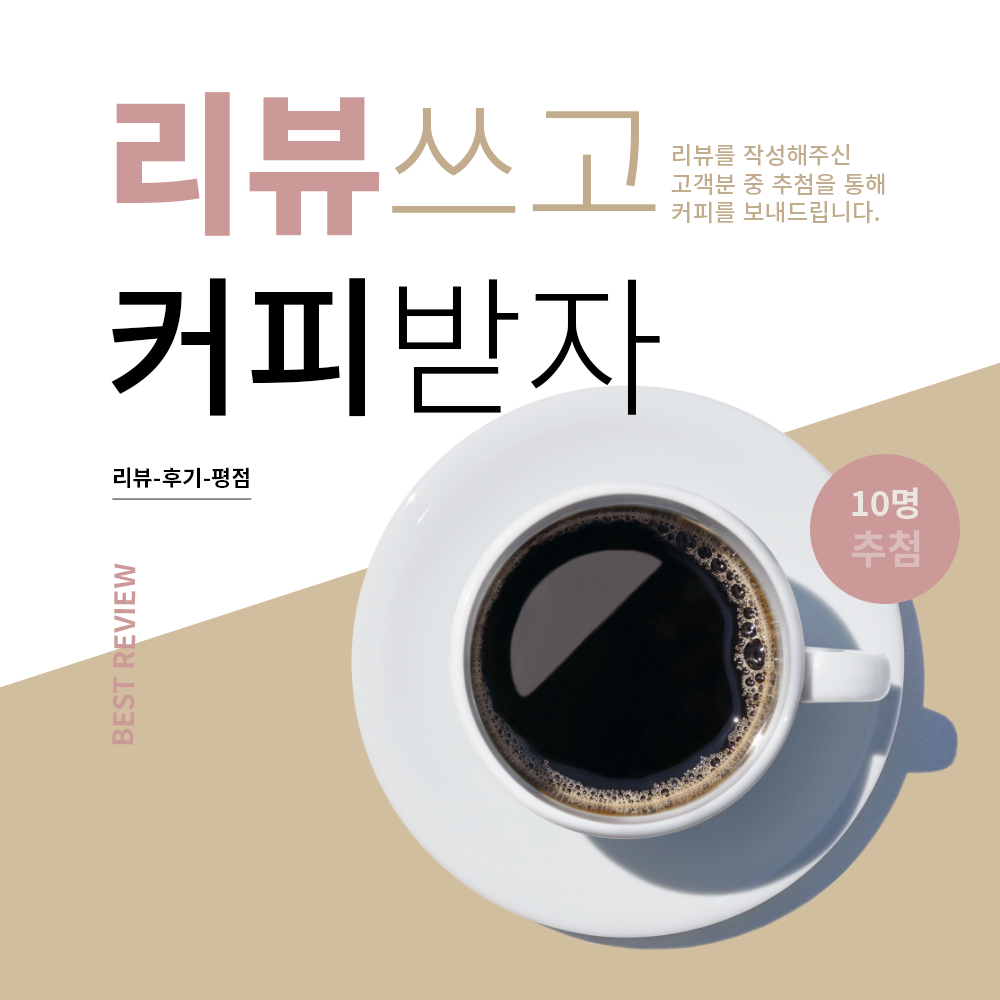
<style>
.page{position:relative;width:1000px;height:1000px;background:#ffffff}
.page>*{position:absolute;margin:0}
.t1{font:152.4px "NotoSansKR-Black";color:#cc9999}
.t2{font:152.4px "NotoSansKR-Light";color:#c2ac8e}
.t3{font:152.4px "NotoSansKR-Medium";color:#000000}
.t4{font:152.4px "NotoSansKR-Light";color:#000000}
.t5{font:23.7px "NotoSansKR-Medium";color:#c2ac8e}
.t6{font:22.1px "NotoSansKR-Bold";color:#000000;text-decoration:underline}
.t7{font:34px "NotoSansKR-Bold";color:#ebe6df}
.t8{font:40px "NotoSansKR-Bold";color:#dabcbc}
.t9{font:28.1px "NotoSansKR-Bold";color:#cc9999;text-transform:uppercase}
</style>
<div class="page">
<p class="t1" style="left:111px;top:92px;width:549px;height:325px">리뷰<span class="t2">쓰고<br></span><span class="t3">커피</span><span class="t4">받자</span></p>
<p class="t5" style="left:671px;top:144px;width:214px;height:80px">리뷰를 작성해주신<br>고객분 중 추첨을 통해<br>커피를 보내드립니다.</p>
<p class="t6" style="left:112px;top:467px;width:140px;height:33px">리뷰-후기-평점</p>
<p class="t7" style="left:851px;top:487px;width:69px;height:81px">１0명<br><span class="t8">추첨</span></p>
<p class="t9" style="left:112px;top:563px;width:24px;height:182px;rotate:-89deg">best review</p>
</div>
